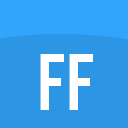
<style>
.page{position:relative;width:128px;height:128px;background:#2c95e4}
.page>*{position:absolute;margin:0}
.t1{font:80px "BebasKai";color:#ffffff}
</style>
<div class="page">
<p class="t1" style="left:40px;top:54px;width:53px;height:56px">FF</p>
</div>
